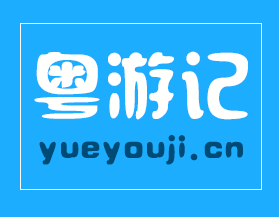
<style>
.page{position:relative;width:279px;height:217px;background:#1dadff}
.page>*{position:absolute;margin:0}
.t1{font:74px "SXSLST";color:#fffffe}
.t2{font:33px "SXSLST";color:#004b75}
</style>
<div class="page">
<p class="t1" style="left:34px;top:51px;width:214px;height:69px">粤游记</p>
<p class="t2" style="left:39px;top:134px;width:204px;height:31px">yueyouji.cn</p>
</div>
